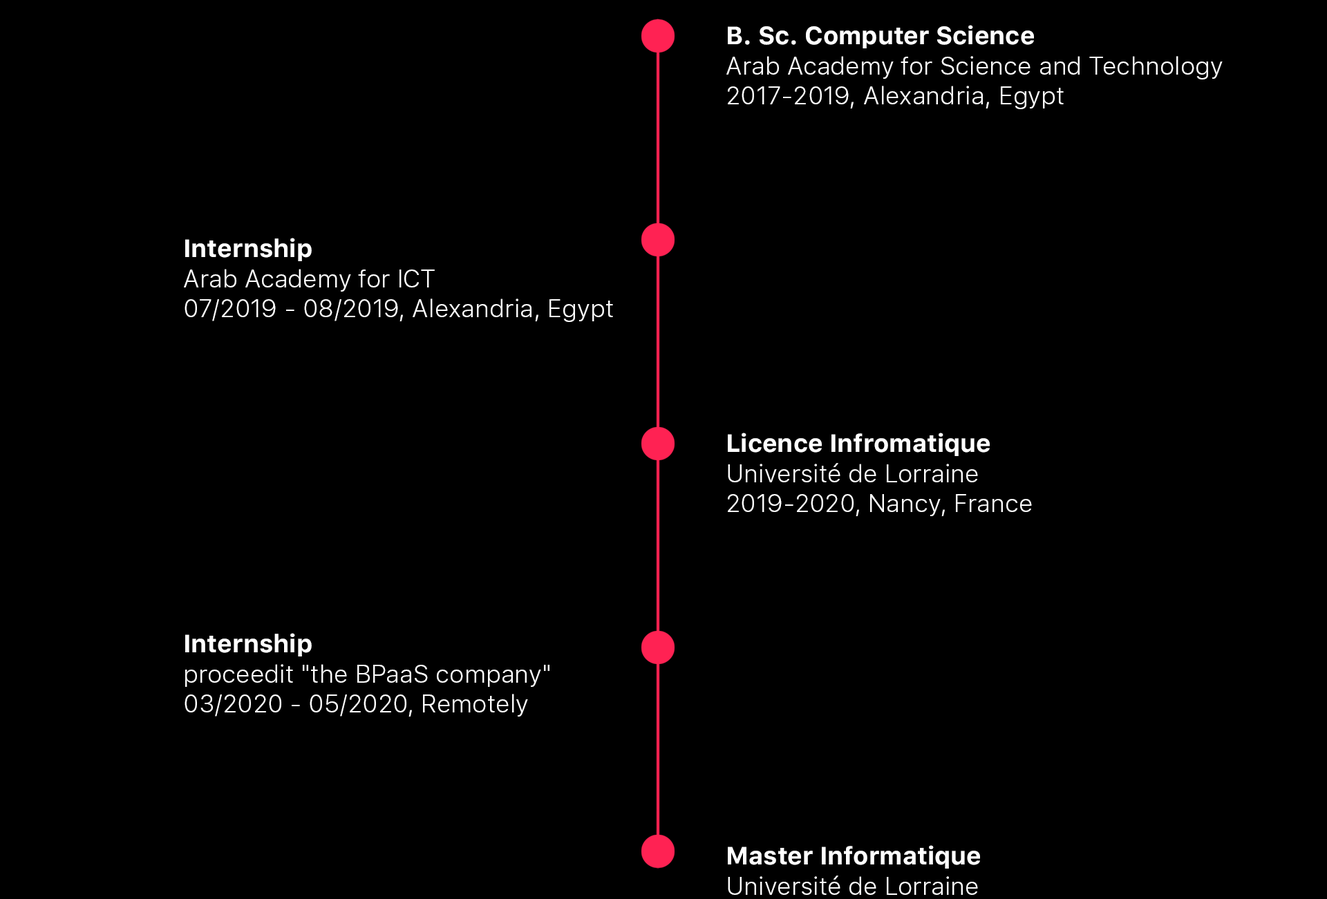
<style>
.page{position:relative;width:1327px;height:899px;background:#000000}
.page>*{position:absolute;margin:0}
.t1{font:24.9px "SFUIText-Light";color:#ffffff}
.t2{font:24.9px "SFUIText-Bold";color:#ffffff}
</style>
<div class="page">
<p class="t1" style="left:726px;top:25px;width:496px;height:84px;text-align:right"><span class="t2">B. Sc. Computer Science<br></span>Arab Academy for Science and Technology<br>2017-2019, Alexandria, Egypt</p>
<p class="t1" style="left:184px;top:238px;width:429px;height:84px;text-align:right"><span class="t2">Internship<br></span>Arab Academy for ICT<br>07/2019 - 08/2019, Alexandria, Egypt</p>
<p class="t1" style="left:728px;top:433px;width:304px;height:83px;text-align:right"><span class="t2">Licence Infromatique<br></span>Université de Lorraine<br>2019-2020, Nancy, France</p>
<p class="t1" style="left:184px;top:633px;width:365px;height:83px;text-align:right"><span class="t2">Internship<br></span>proceedit "the BPaaS company"<br>03/2020 - 05/2020, Remotely</p>
</div>
